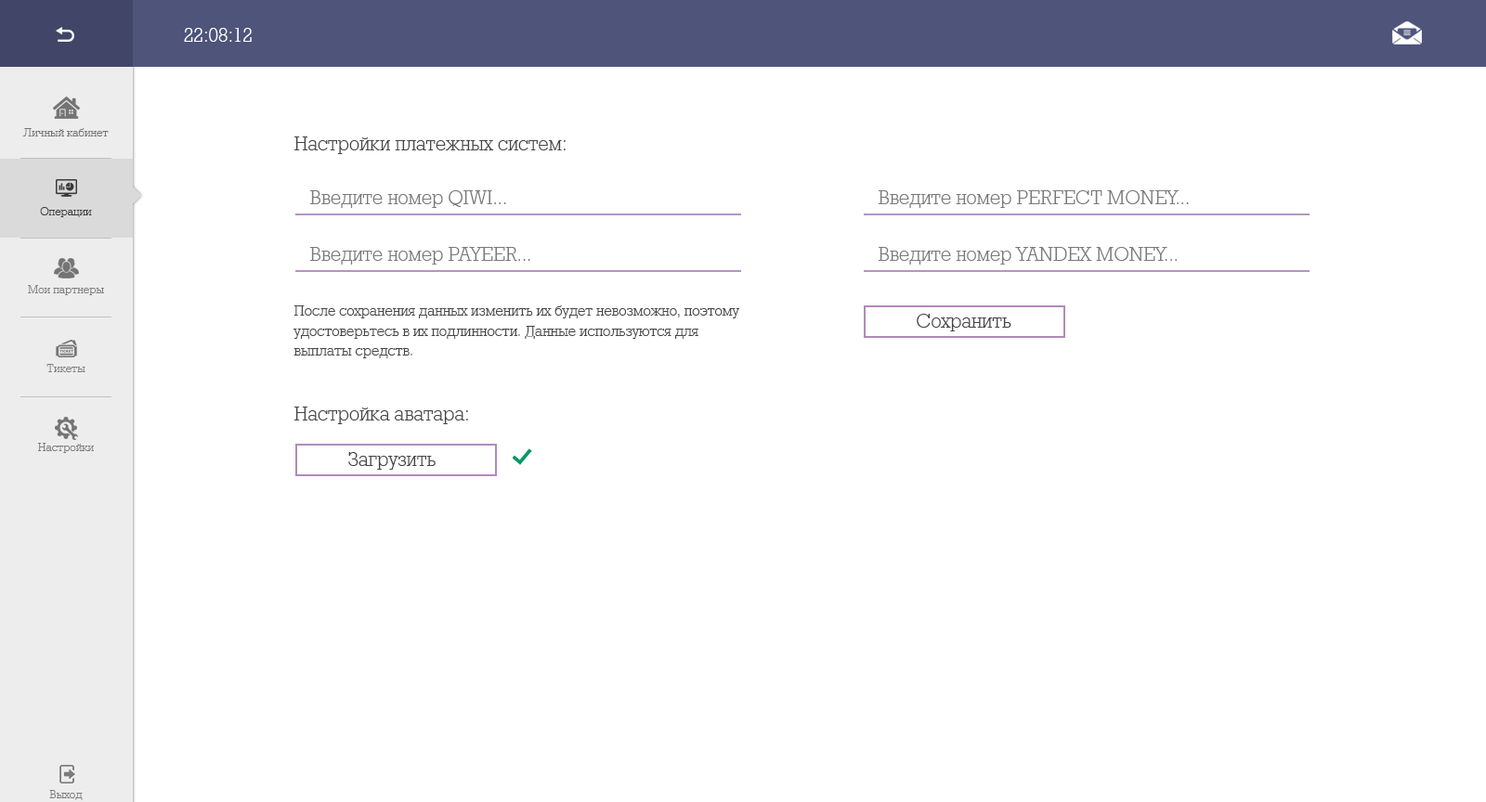
<style>
.page{position:relative;width:1486px;height:802px;background:#ffffff}
.page>*{position:absolute;margin:0}
.t1{font:22.3px "Rodeo95";color:#ffffff}
.t2{font:13px "Rodeo95";color:#747474}
.t3{font:22.3px "Rodeo95";color:#464646}
.t4{font:22.3px "Rodeo95";color:#7a7a7a}
.t5{font:13px "Rodeo95";color:#393939}
.t6{font:13px "Rodeo95";color:#7e7e7e}
.t7{font:16.7px/20px "Rodeo95";color:#464646}
.t8{font:22.3px "Rodeo95";color:#454545}
</style>
<div class="page">
<p class="t1" style="left:184px;top:28px;width:68px;height:14px">22:08:12</p>
<p class="t2" style="left:22px;top:128px;width:87px;height:9px">Личный кабинет</p>
<p class="t3" style="left:294px;top:137px;width:272px;height:17px">Настройки платежных систем:</p>
<p class="t4" style="left:310px;top:190px;width:196px;height:18px">Введите номер QIWI...</p>
<p class="t4" style="left:879px;top:190px;width:310px;height:18px">Введите номер PERFECT MONEY...</p>
<p class="t5" style="left:40px;top:207px;width:52px;height:10px">Операции</p>
<p class="t4" style="left:310px;top:247px;width:220px;height:18px">Введите номер PAYEER...</p>
<p class="t4" style="left:879px;top:247px;width:298px;height:18px">Введите номер YANDEX MONEY...</p>
<p class="t6" style="left:28px;top:285px;width:76px;height:10px">Мои партнеры</p>
<p class="t7" style="left:293px;top:306px;width:447px;height:52px">После сохранения данных изменить их будет невозможно, поэтому удостоверьтесь в их подлинности. Данные используются для <br>выплаты средств.</p>
<p class="t8" style="left:917px;top:314px;width:94px;height:18px">Сохранить</p>
<p class="t6" style="left:46px;top:364px;width:39px;height:8px">Тикеты</p>
<p class="t3" style="left:294px;top:407px;width:174px;height:17px">Настройка аватара:</p>
<p class="t6" style="left:38px;top:443px;width:56px;height:10px">Настройки</p>
<p class="t8" style="left:348px;top:452px;width:88px;height:18px">Загрузить</p>
<p class="t6" style="left:49px;top:790px;width:34px;height:11px">Выход</p>
</div>
